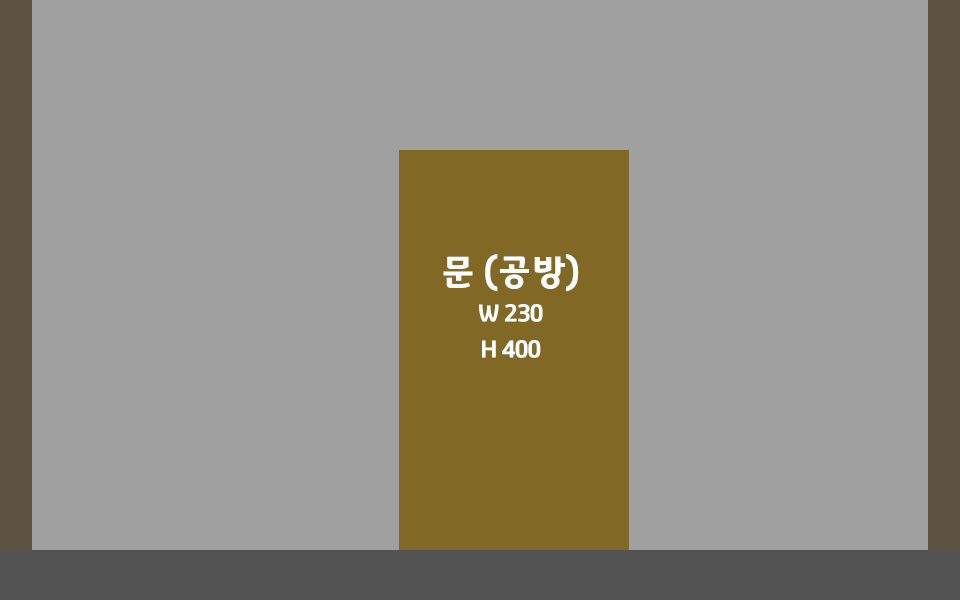
<style>
.page{position:relative;width:960px;height:600px;background:#a0a0a0}
.page>*{position:absolute;margin:0}
.t1{font:24px/36px "GyeonggiTitleV";letter-spacing:-0.05em;color:#ffffff}
.t2{font:36px/12px "GyeonggiTitleV";letter-spacing:-0.05em;color:#ffffff}
</style>
<div class="page">
<p class="t1" style="left:443px;top:254px;width:136px;height:104px;text-align:center"><span class="t2">문 (공방)<br><br><br><br></span>W 230<br>H 400</p>
</div>
